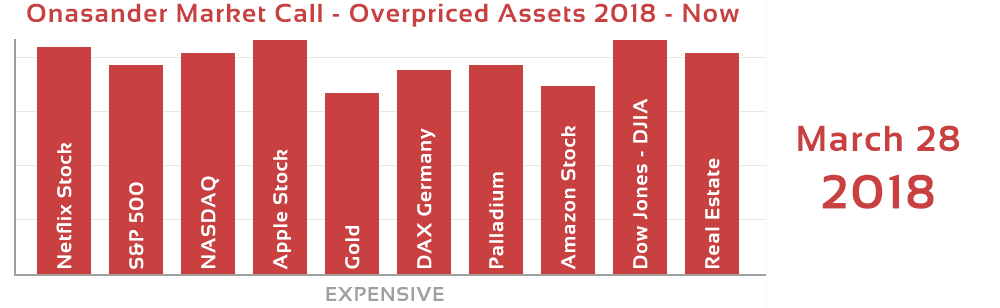
<style>
.page{position:relative;width:1000px;height:308px;background:#ffffff}
.page>*{position:absolute;margin:0}
.t1{font:26px "Sansation-Bold";letter-spacing:0.05em;color:#c84040}
.t2{font:20px "Sansation-Bold";letter-spacing:0.05em;color:#ffffff}
.t3{font:36px "Sansation-Bold";letter-spacing:0.05em;color:#c84040}
.t4{font:48px "Sansation-Bold";letter-spacing:0.05em;color:#c84040}
.t5{font:20px "Sansation-Bold";letter-spacing:0.05em;color:#9f9fa0}
</style>
<div class="page">
<p class="t1" style="left:27px;top:3px;width:712px;height:24px">Onasander Market Call - Overpriced Assets 2018 - Now</p>
<p class="t2" style="left:633px;top:98px;width:15px;height:170px;rotate:-90deg">Dow Jones - DJIA</p>
<p class="t2" style="left:561px;top:125px;width:15px;height:145px;rotate:-90deg">Amazon Stock</p>
<p class="t3" style="left:798px;top:125px;width:161px;height:84px;text-align:center">March 28<br><span class="t4">2018</span></p>
<p class="t2" style="left:417px;top:128px;width:19px;height:140px;rotate:-90deg">DAX Germany</p>
<p class="t2" style="left:56px;top:142px;width:16px;height:126px;rotate:-90deg">Netflix Stock</p>
<p class="t2" style="left:273px;top:149px;width:18px;height:121px;rotate:-90deg">Apple Stock</p>
<p class="t2" style="left:705px;top:158px;width:15px;height:110px;rotate:-90deg">Real Estate</p>
<p class="t2" style="left:489px;top:172px;width:15px;height:96px;rotate:-90deg">Palladium</p>
<p class="t2" style="left:129px;top:182px;width:15px;height:87px;rotate:-90deg">S&amp;P 500</p>
<p class="t2" style="left:201px;top:176px;width:19px;height:92px;rotate:-90deg">NASDAQ</p>
<p class="t2" style="left:345px;top:226px;width:15px;height:43px;rotate:-90deg">Gold</p>
<p class="t5" style="left:326px;top:287px;width:118px;height:14px">EXPENSIVE</p>
</div>
